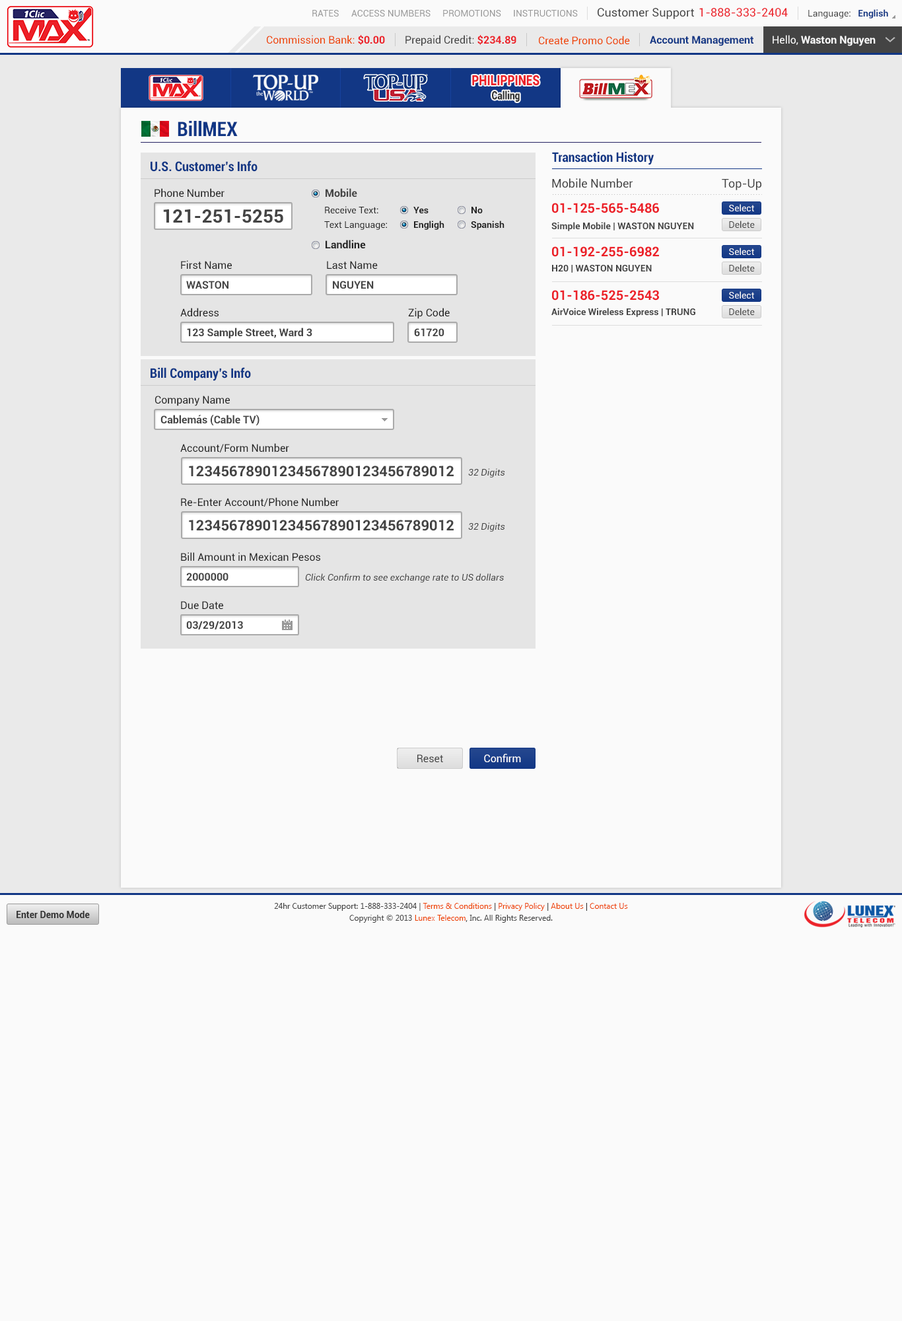
<style>
.page{position:relative;width:902px;height:1321px;background:#fafafa}
.page>*{position:absolute;margin:0}
.t1{font:9.2px "Roboto-Regular";color:#999999}
.t2{font:11.6px "Roboto-Regular";color:#444444}
.t3{font:11.6px "Roboto-Regular";color:#ec2029}
.t4{font:9.2px "Roboto-Regular";color:#444444}
.t5{font:9.2px "Roboto-Bold";color:#123785}
.t6{font:10.6px "Roboto-Regular";color:#ee4400}
.t7{font:10.6px "Roboto-Bold";color:#ec2028}
.t8{font:10.6px "Roboto-Regular";color:#444444}
.t9{font:10.6px "Roboto-Bold";color:#123785}
.t10{font:10.6px "Roboto-Bold";color:#fafafa}
.t11{font:10.6px "Roboto-Regular";color:#fafafa}
.t12{font:14.1px "Roboto-Black";color:#ec2028;scale:0.81 1}
.t13{font:11.3px "Roboto-Black";color:#333333;scale:0.81 1}
.t14{font:19.8px "Roboto-BoldCondensed";color:#123785}
.t15{font:13.2px "Roboto-BoldCondensed";color:#123785}
.t16{font:11.9px "Roboto-Regular";color:#444444}
.t17{font:10.6px "Roboto-Regular";color:#222222}
.t18{font:10.6px "Roboto-Bold";color:#444444}
.t19{font:18.5px "Roboto-Bold";color:#444444}
.t20{font:9.2px "Roboto-Regular";color:#222222}
.t21{font:9.2px "Roboto-Bold";color:#222222}
.t22{font:13.2px "Roboto-Bold";color:#ec2129}
.t23{font:9.2px "Roboto-Regular";color:#fafafa}
.t24{font:9.2px "Roboto-Bold";color:#444444}
.t25{font:10.6px "Roboto-Bold";color:#222222}
.t26{font:14.5px "Roboto-Bold";color:#444444}
.t27{font:9.2px "Roboto-Italic";color:#444444}
.t28{font:10.6px "Roboto-Regular";color:#ffffff}
.t29{font:7.9px/11.9px "SegoeUI";color:#444444}
.t30{font:7.9px/11.9px "SegoeUI";color:#ee4400}
.t31{font:7.9px/11.9px "SegoeUI";color:#333333}
.t32{font:9.2px "Roboto-Bold";color:#333333}
</style>
<div class="page">
<p class="t1" style="left:312px;top:10px;width:27px;height:7px">RATES</p>
<p class="t1" style="left:351px;top:10px;width:80px;height:7px">ACCESS NUMBERS</p>
<p class="t1" style="left:443px;top:10px;width:58px;height:7px">PROMOTIONS</p>
<p class="t1" style="left:514px;top:10px;width:64px;height:7px">INSTRUCTIONS</p>
<p class="t2" style="left:598px;top:8px;width:96px;height:11px">Customer Support</p>
<p class="t3" style="left:700px;top:8px;width:88px;height:9px">1-888-333-2404</p>
<p class="t4" style="left:809px;top:9px;width:80px;height:9px">Language:   <span class="t5">English</span></p>
<p class="t6" style="left:267px;top:35px;width:118px;height:10px">Commission Bank: <span class="t7">$0.00</span></p>
<p class="t8" style="left:406px;top:35px;width:111px;height:11px">Prepaid Credit: <span class="t7">$234.89</span></p>
<p class="t6" style="left:539px;top:36px;width:91px;height:9px">Create Promo Code</p>
<p class="t9" style="left:650px;top:36px;width:104px;height:10px">Account Management</p>
<p class="t10" style="left:773px;top:35px;width:103px;height:11px"><span class="t11">Hello, </span>Waston Nguyen</p>
<p class="t12" style="left:472px;top:75px;width:68px;height:11px">PHILIPPINES</p>
<p class="t13" style="left:492px;top:91px;width:28px;height:11px">Calling</p>
<p class="t14" style="left:178px;top:121px;width:60px;height:15px">BillMEX</p>
<p class="t15" style="left:151px;top:161px;width:107px;height:11px">U.S. Customer’s Info</p>
<p class="t15" style="left:552px;top:151px;width:103px;height:14px">Transaction History</p>
<p class="t16" style="left:552px;top:178px;width:82px;height:10px">Mobile Number</p>
<p class="t16" style="left:722px;top:179px;width:40px;height:11px">Top-Up</p>
<p class="t17" style="left:155px;top:188px;width:70px;height:10px">Phone Number</p>
<p class="t18" style="left:326px;top:188px;width:31px;height:10px">Mobile</p>
<p class="t19" style="left:163px;top:209px;width:120px;height:14px">121-251-5255</p>
<p class="t20" style="left:325px;top:206px;width:54px;height:7px">Receive Text:</p>
<p class="t21" style="left:414px;top:207px;width:15px;height:6px">Yes</p>
<p class="t21" style="left:472px;top:207px;width:11px;height:6px">No</p>
<p class="t22" style="left:552px;top:203px;width:107px;height:10px">01-125-565-5486</p>
<p class="t23" style="left:729px;top:204px;width:25px;height:7px">Select</p>
<p class="t20" style="left:324px;top:221px;width:63px;height:9px">Text Language:</p>
<p class="t21" style="left:414px;top:221px;width:31px;height:9px">Engligh</p>
<p class="t21" style="left:471px;top:221px;width:34px;height:9px">Spanish</p>
<p class="t24" style="left:552px;top:222px;width:142px;height:9px">Simple Mobile | WASTON NGUYEN</p>
<p class="t4" style="left:729px;top:221px;width:26px;height:7px">Delete</p>
<p class="t25" style="left:326px;top:240px;width:40px;height:9px">Landline</p>
<p class="t22" style="left:552px;top:246px;width:107px;height:11px">01-192-255-6982</p>
<p class="t23" style="left:729px;top:248px;width:25px;height:7px">Select</p>
<p class="t17" style="left:181px;top:260px;width:51px;height:10px">First Name</p>
<p class="t17" style="left:327px;top:261px;width:51px;height:9px">Last Name</p>
<p class="t24" style="left:552px;top:265px;width:100px;height:8px">H20 | WASTON NGUYEN</p>
<p class="t4" style="left:729px;top:264px;width:26px;height:8px">Delete</p>
<p class="t18" style="left:186px;top:281px;width:43px;height:8px">WASTON</p>
<p class="t18" style="left:333px;top:281px;width:41px;height:8px">NGUYEN</p>
<p class="t22" style="left:552px;top:290px;width:107px;height:11px">01-186-525-2543</p>
<p class="t23" style="left:729px;top:291px;width:25px;height:8px">Select</p>
<p class="t17" style="left:180px;top:308px;width:39px;height:8px">Address</p>
<p class="t17" style="left:408px;top:308px;width:42px;height:11px">Zip Code</p>
<p class="t24" style="left:552px;top:308px;width:144px;height:9px">AirVoice Wireless Express | TRUNG</p>
<p class="t4" style="left:729px;top:308px;width:26px;height:7px">Delete</p>
<p class="t18" style="left:187px;top:328px;width:125px;height:11px">123 Sample Street, Ward 3</p>
<p class="t18" style="left:414px;top:328px;width:31px;height:8px">61720</p>
<p class="t15" style="left:151px;top:367px;width:100px;height:14px">Bill Company’s Info</p>
<p class="t17" style="left:155px;top:396px;width:75px;height:10px">Company Name</p>
<p class="t18" style="left:161px;top:414px;width:99px;height:12px">Cablemás (Cable TV)</p>
<p class="t17" style="left:180px;top:443px;width:109px;height:10px">Account/Form Number</p>
<p class="t26" style="left:189px;top:466px;width:265px;height:11px">12345678901234567890123456789012</p>
<p class="t27" style="left:468px;top:468px;width:37px;height:10px">32 Digits</p>
<p class="t17" style="left:181px;top:497px;width:158px;height:10px">Re-Enter Account/Phone Number</p>
<p class="t26" style="left:189px;top:520px;width:265px;height:11px">12345678901234567890123456789012</p>
<p class="t27" style="left:468px;top:523px;width:37px;height:9px">32 Digits</p>
<p class="t17" style="left:181px;top:552px;width:139px;height:10px">Bill Amount in Mexican Pesos</p>
<p class="t18" style="left:186px;top:573px;width:43px;height:8px">2000000</p>
<p class="t27" style="left:305px;top:573px;width:199px;height:10px">Click Confirm to see exchange rate to US dollars</p>
<p class="t17" style="left:181px;top:601px;width:42px;height:9px">Due Date</p>
<p class="t18" style="left:186px;top:621px;width:57px;height:9px">03/29/2013</p>
<p class="t8" style="left:418px;top:754px;width:25px;height:8px">Reset</p>
<p class="t28" style="left:484px;top:754px;width:37px;height:8px">Confirm</p>
<p class="t29" style="left:274px;top:903px;width:354px;height:20px;text-align:center">24hr Customer Support: 1-888-333-2404 | <span class="t30">Terms &amp; Conditions</span><span class="t31"> | </span><span class="t30">Privacy Policy</span><span class="t31"> | </span><span class="t30">About Us</span><span class="t31"> | </span><span class="t30">Contact Us<br></span>Copyright © 2013 <span class="t30">Lunex Telecom</span><span class="t31">,</span> Inc. All Rights Reserved.</p>
<p class="t32" style="left:17px;top:911px;width:73px;height:7px">Enter Demo Mode</p>
</div>
